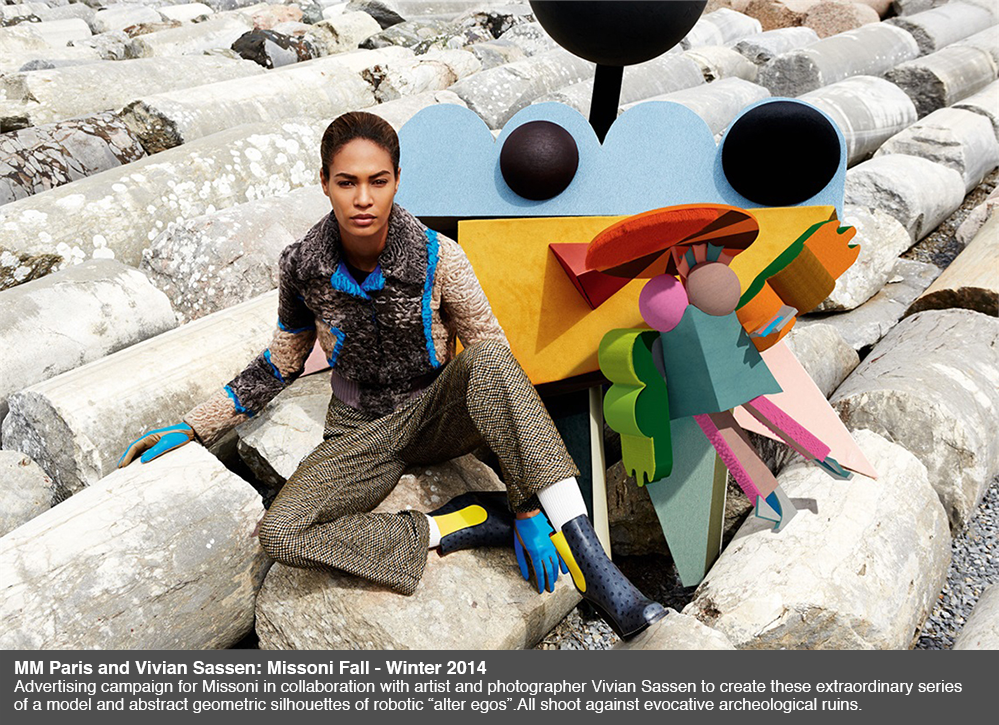
<style>
.page{position:relative;width:999px;height:725px}
.page>*{position:absolute;margin:0}
.t1{font:16.7px/18px "Helvetica";color:#ffffff}
.t2{font:18px/18px "Helvetica-Bold";color:#ffffff}
</style>
<div class="page">
<p class="t1" style="left:14px;top:661px;width:948px;height:52px"><span class="t2">MM Paris and Vivian Sassen: Missoni Fall - Winter 2014<br></span>Advertising campaign for Missoni in collaboration with artist and photographer Vivian Sassen to create these extraordinary series<br>of a model and abstract geometric silhouettes of robotic “alter egos”.All shoot against evocative archeological ruins.</p>
</div>
